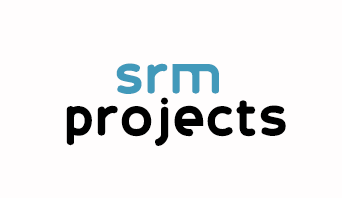
<style>
.page{position:relative;width:342px;height:198px;background:#fffdfd}
.page>*{position:absolute;margin:0}
.t1{font:58.3px "20thCenturyFont";color:#4299ba}
.t2{font:58.3px "20thCenturyFont";color:#000000}
</style>
<div class="page">
<p class="t1" style="left:116px;top:63px;width:103px;height:31px">srm</p>
<p class="t2" style="left:66px;top:97px;width:220px;height:49px">projects</p>
</div>
